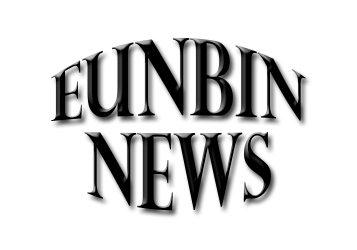
<style>
.page{position:relative;width:357px;height:250px;background:#ffffff}
.page>*{position:absolute;margin:0}
.t1{font:60px/53px "PerpetuaTitlingMT-Bold";color:#000000}
</style>
<div class="page">
<p class="t1" style="left:51px;top:37px;width:255px;height:174px;text-align:center">Eunbin<br>News</p>
</div>
